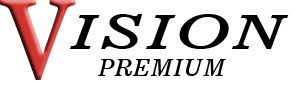
<style>
.page{position:relative;width:300px;height:90px;background:#ffffff}
.page>*{position:absolute;margin:0}
.t1{font:47.5px "News701BT-ItalicA";color:#000000;scale:1.42 1}
.t2{font:23.7px "News701BT-ItalicA";color:#000000}
</style>
<div class="page">
<p class="t1" style="left:70px;top:14px;width:219px;height:35px">ISION</p>
<p class="t2" style="left:98px;top:59px;width:128px;height:17px">PREMIUM</p>
</div>
